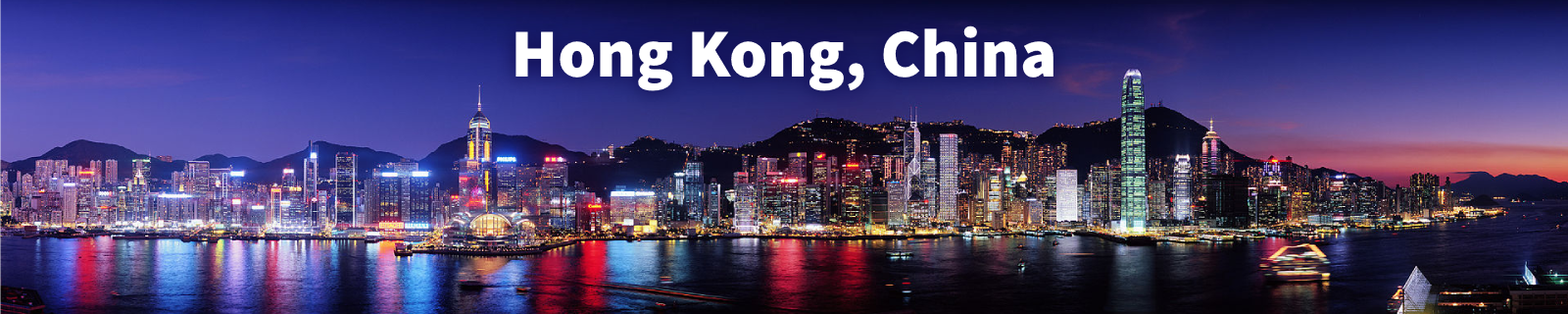
<style>
.page{position:relative;width:1568px;height:314px}
.page>*{position:absolute;margin:0}
.t1{font:68.6px "SourceSansPro-Black";color:#ffffff}
</style>
<div class="page">
<p class="t1" style="left:515px;top:25px;width:539px;height:66px">Hong Kong, China</p>
</div>
